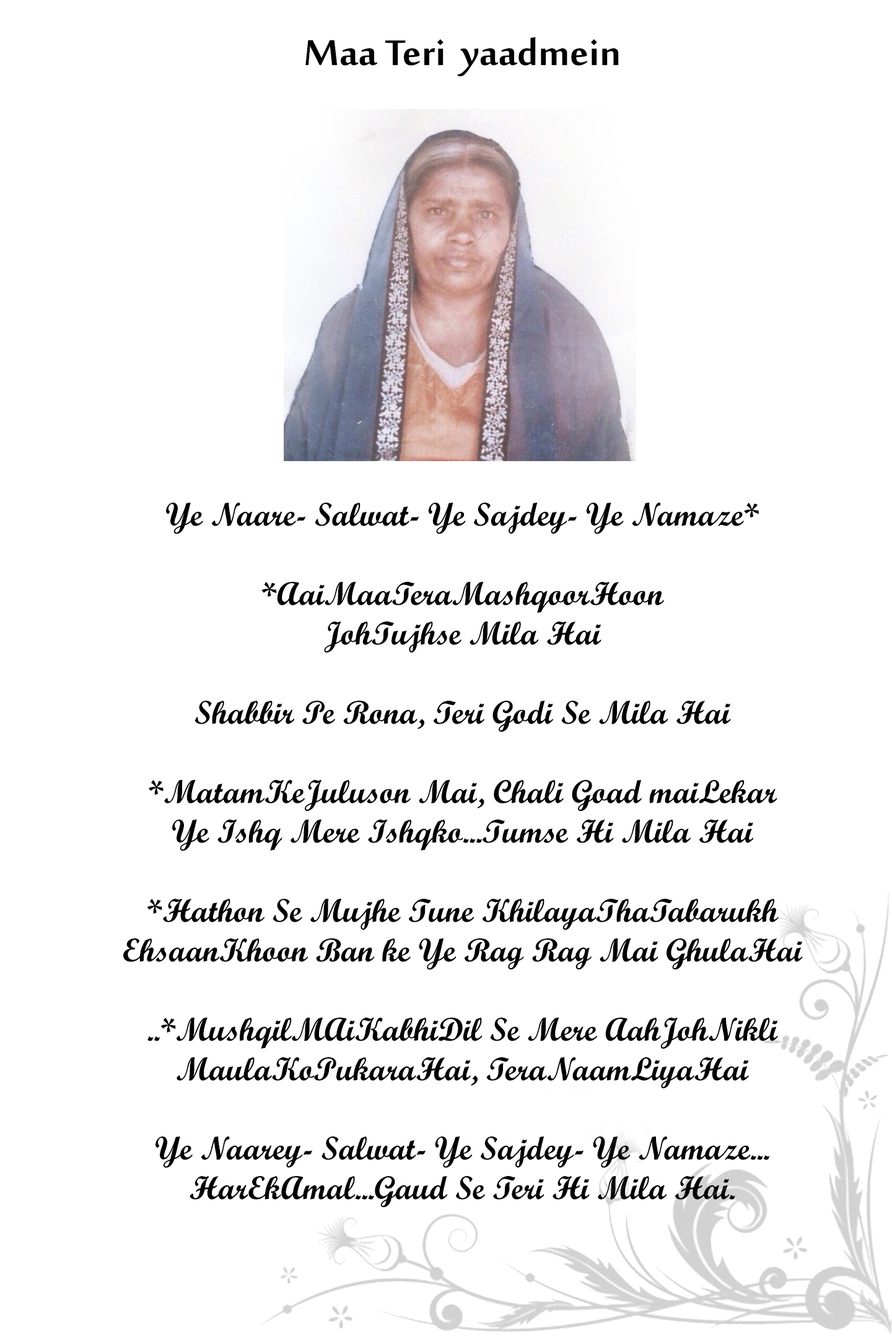
<style>
.page{position:relative;width:892px;height:1337px;background:#ffffff}
.page>*{position:absolute;margin:0}
.t1{font:49.5px "SakkalMajallaBold";color:#000000}
.t2{font:33px "ScriptMTBold";color:#000000}
</style>
<div class="page">
<p class="t1" style="left:305px;top:37px;width:314px;height:40px">Maa Teri  yaadmein</p>
<p class="t2" style="left:123px;top:503px;width:679px;height:705px;text-align:center">Ye Naare- Salwat- Ye Sajdey- Ye Namaze*<br><br>*AaiMaaTeraMashqoorHoon<br>JohTujhse Mila Hai<br><br>Shabbir Pe Rona, Teri Godi Se Mila Hai<br><br>*MatamKeJuluson Mai, Chali Goad maiLekar<br>Ye Ishq Mere Ishqko...Tumse Hi Mila Hai<br><br>*Hathon Se Mujhe Tune KhilayaThaTabarukh<br>EhsaanKhoon Ban ke Ye Rag Rag Mai GhulaHai<br><br>..*MushqilMAiKabhiDil Se Mere AahJohNikli<br>MaulaKoPukaraHai, TeraNaamLiyaHai<br><br>Ye Naarey- Salwat- Ye Sajdey- Ye Namaze...<br>HarEkAmal...Gaud Se Teri Hi Mila Hai.</p>
</div>
